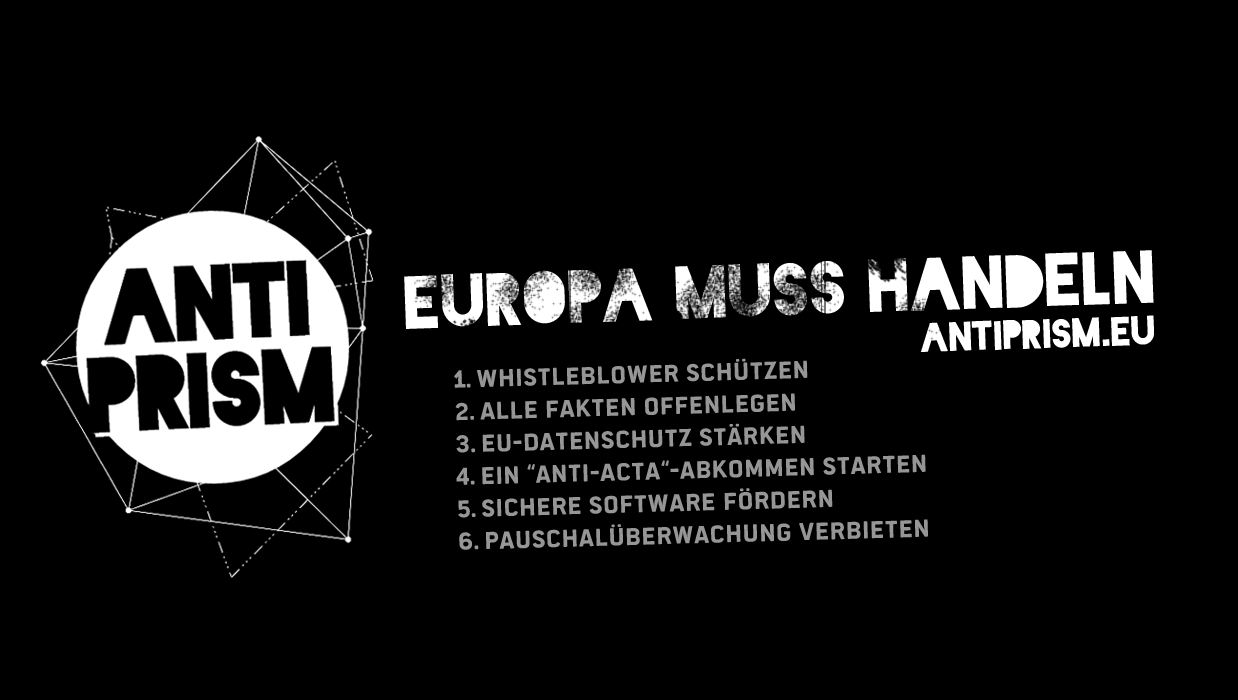
<style>
.page{position:relative;width:1238px;height:700px;background:#000000}
.page>*{position:absolute;margin:0}
.t1{font:70.5px "Blackout-Midnight";color:#ffffff}
.t2{font:38.9px "Blackout-Midnight";color:#ffffff}
.t3{font:27px "PoliticsHead-Bold";color:#969696}
</style>
<div class="page">
<p class="t1" style="left:404px;top:250px;width:750px;height:79px;rotate:-2deg">EUROPA MUSS HANDELN</p>
<p class="t2" style="left:920px;top:315px;width:234px;height:37px;rotate:-2deg">antiprism.eu</p>
<p class="t3" style="left:454px;top:358px;width:474px;height:192px;rotate:-2deg">1. whistleblower schützen<br>2. alle fakten offenlegen<br>3. EU-Datenschutz stärken<br>4. Ein “Anti-ACtA“-Abkommen starten<br>5. sichere software fördern<br>6. pauschalüberwachung verbieten</p>
</div>
